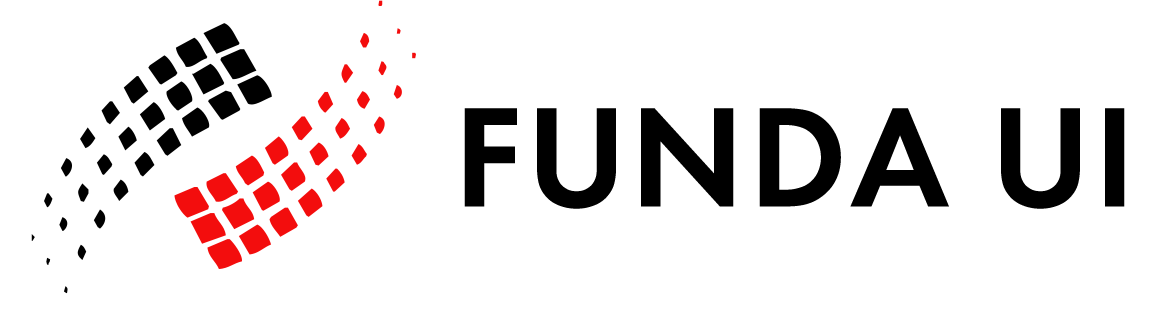
<style>
.page{position:relative;width:1164px;height:321px;background:#ffffff}
.page>*{position:absolute;margin:0}
.t1{font:146.9px "FuturaPTW01-Demi";letter-spacing:0.025em;color:#000000;text-transform:uppercase}
</style>
<div class="page">
<p class="t1" style="left:464px;top:108px;width:661px;height:101px">Funda ui</p>
</div>
